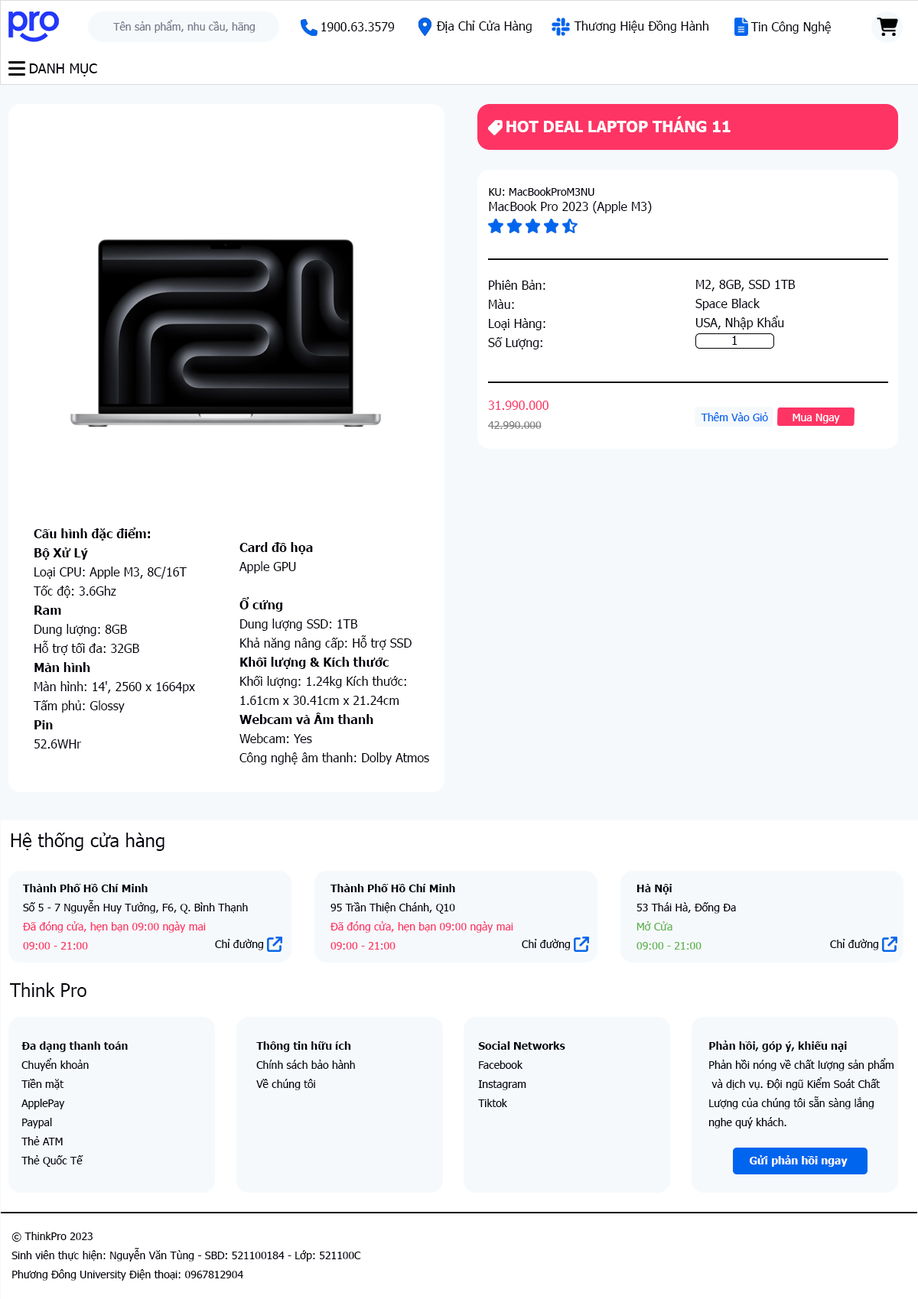
<style>
.page{position:relative;width:918px;height:1299px;background:#ffffff}
.page>*{position:absolute;margin:0}
.t1{font:10.7px "Tahoma";color:#75798a}
.t2{font:12.2px "Tahoma";color:#00000b}
.t3{font:13.8px "Tahoma";color:#00000b}
.t4{font:15.3px "Tahoma-Bold";color:#ffffff}
.t5{font:10.7px "Tahoma";color:#00000b}
.t6{font:12.2px/19.1px "Tahoma";color:#00000b}
.t7{font:12.2px/19.1px "Tahoma";color:#fe3464}
.t8{font:10.7px/19.1px "Tahoma";color:#808080}
.t9{font:10.7px "Tahoma";color:#0065ee}
.t10{font:10.7px "Tahoma";color:#ffffff}
.t11{font:12.2px/19.1px "Tahoma-Bold";color:#00000b}
.t12{font:18.4px "Tahoma";color:#00000b}
.t13{font:10.7px/19.1px "Tahoma";color:#fe3464}
.t14{font:10.7px/19.1px "Tahoma-Bold";color:#00000b}
.t15{font:10.7px/19.1px "Tahoma";color:#00000b}
.t16{font:10.7px/19.1px "Tahoma";color:#61b351}
.t17{font:10.7px "Tahoma-Bold";color:#ffffff}
</style>
<div class="page">
<p class="t1" style="left:113px;top:20px;width:142px;height:13px">Tên sản phẩm, nhu cầu, hãng</p>
<p class="t2" style="left:321px;top:22px;width:74px;height:9px">1900.63.3579</p>
<p class="t2" style="left:436px;top:21px;width:96px;height:12px">Địa Chỉ Cửa Hàng</p>
<p class="t2" style="left:574px;top:21px;width:135px;height:12px">Thương Hiệu Đồng Hành</p>
<p class="t2" style="left:750px;top:21px;width:81px;height:13px">Tin Công Nghệ</p>
<p class="t3" style="left:29px;top:63px;width:68px;height:13px">DANH MỤC</p>
<p class="t4" style="left:506px;top:116px;width:224px;height:16px">HOT DEAL LAPTOP THÁNG 11</p>
<p class="t2" style="left:489px;top:187px;width:163px;height:26px"><span class="t5">KU: MacBookProM3NU<br></span>MacBook Pro 2023 (Apple M3)</p>
<p class="t6" style="left:488px;top:280px;width:57px;height:69px">Phiên Bản:<br>Màu:<br>Loại Hàng:<br>Số Lượng:</p>
<p class="t6" style="left:695px;top:280px;width:100px;height:50px">M2, 8GB, SSD 1TB<br>Space Black<br>USA, Nhập Khẩu</p>
<p class="t2" style="left:732px;top:336px;width:5px;height:9px">1</p>
<p class="t7" style="left:488px;top:401px;width:60px;height:28px">31.990.000<br><span class="t8">42.990.000</span></p>
<p class="t9" style="left:701px;top:412px;width:67px;height:9px">Thêm Vào Giỏ</p>
<p class="t10" style="left:792px;top:414px;width:48px;height:10px">Mua Ngay</p>
<p class="t6" style="left:34px;top:528px;width:161px;height:221px"><span class="t11">Cấu hình đặc điểm:<br>Bộ Xử Lý<br></span>Loại CPU: Apple M3, 8C/16T<br>Tốc độ: 3.6Ghz<br><span class="t11">Ram<br></span>Dung lượng: 8GB<br>Hỗ trợ tối đa: 32GB<br><span class="t11">Màn hình<br></span>Màn hình: 14', 2560 x 1664px<br>Tấm phủ: Glossy<br><span class="t11">Pin<br></span>52.6WHr</p>
<p class="t6" style="left:239px;top:542px;width:190px;height:223px"><span class="t11">Card đồ họa<br></span>Apple GPU<br><br><span class="t11">Ổ cứng<br></span>Dung lượng SSD: 1TB<br>Khả năng nâng cấp: Hỗ trợ SSD<br><span class="t11">Khối lượng &amp; Kích thước<br></span>Khối lượng: 1.24kg Kích thước:<br>1.61cm x 30.41cm x 21.24cm<br><span class="t11">Webcam và Âm thanh<br></span>Webcam: Yes<br>Công nghệ âm thanh: Dolby Atmos</p>
<p class="t12" style="left:11px;top:833px;width:153px;height:18px">Hệ thống cửa hàng</p>
<p class="t13" style="left:23px;top:884px;width:225px;height:66px"><span class="t14">Thành Phố Hồ Chí Minh<br></span><span class="t15">Số 5 - 7 Nguyễn Huy Tưởng, F6, Q. Bình Thạnh<br></span>Đã đóng cửa, hẹn bạn 09:00 ngày mai<br>09:00 - 21:00</p>
<p class="t13" style="left:330px;top:884px;width:183px;height:66px"><span class="t14">Thành Phố Hồ Chí Minh<br></span><span class="t15">95 Trần Thiện Chánh, Q10<br></span>Đã đóng cửa, hẹn bạn 09:00 ngày mai<br>09:00 - 21:00</p>
<p class="t16" style="left:636px;top:884px;width:100px;height:66px"><span class="t14">Hà Nội<br></span><span class="t15">53 Thái Hà, Đống Đa<br></span>Mở Cửa<br>09:00 - 21:00</p>
<p class="t5" style="left:215px;top:939px;width:48px;height:12px">Chỉ đường</p>
<p class="t5" style="left:522px;top:939px;width:48px;height:12px">Chỉ đường</p>
<p class="t5" style="left:830px;top:939px;width:48px;height:12px">Chỉ đường</p>
<p class="t12" style="left:10px;top:983px;width:76px;height:14px">Think Pro</p>
<p class="t15" style="left:21px;top:1042px;width:107px;height:125px"><span class="t14">Đa dạng thanh toán<br></span>Chuyển khoản<br>Tiền mặt<br>ApplePay<br>Paypal<br>Thẻ ATM<br>Thẻ Quốc Tế</p>
<p class="t15" style="left:256px;top:1042px;width:99px;height:49px"><span class="t14">Thông tin hữu ích<br></span>Chính sách bảo hành<br>Về chúng tôi</p>
<p class="t15" style="left:478px;top:1042px;width:87px;height:65px"><span class="t14">Social Networks<br></span>Facebook<br>Instagram<br>Tiktok</p>
<p class="t15" style="left:709px;top:1041px;width:184px;height:88px"><span class="t14">Phản hồi, góp ý, khiếu nại<br></span>Phản hồi nóng về chất lượng sản phẩm<br> và dịch vụ. Đội ngũ Kiểm Soát Chất <br>Lượng của chúng tôi sẵn sàng lắng <br>nghe quý khách.</p>
<p class="t17" style="left:749px;top:1156px;width:98px;height:11px">Gửi phản hồi ngay</p>
<p class="t15" style="left:11px;top:1232px;width:350px;height:49px">© ThinkPro 2023<br>Sinh viên thực hiện: Nguyễn Văn Tùng - SBD: 521100184 - Lớp: 521100C<br>Phương Đông University Điện thoại: 0967812904</p>
</div>
